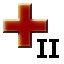
<style>
.page{position:relative;width:64px;height:64px;background:#ffffff}
.page>*{position:absolute;margin:0}
.t1{font:25px "Tahoma-Bold";color:#000000}
</style>
<div class="page">
<p class="t1" style="left:37px;top:39px;width:22px;height:19px">II</p>
</div>
